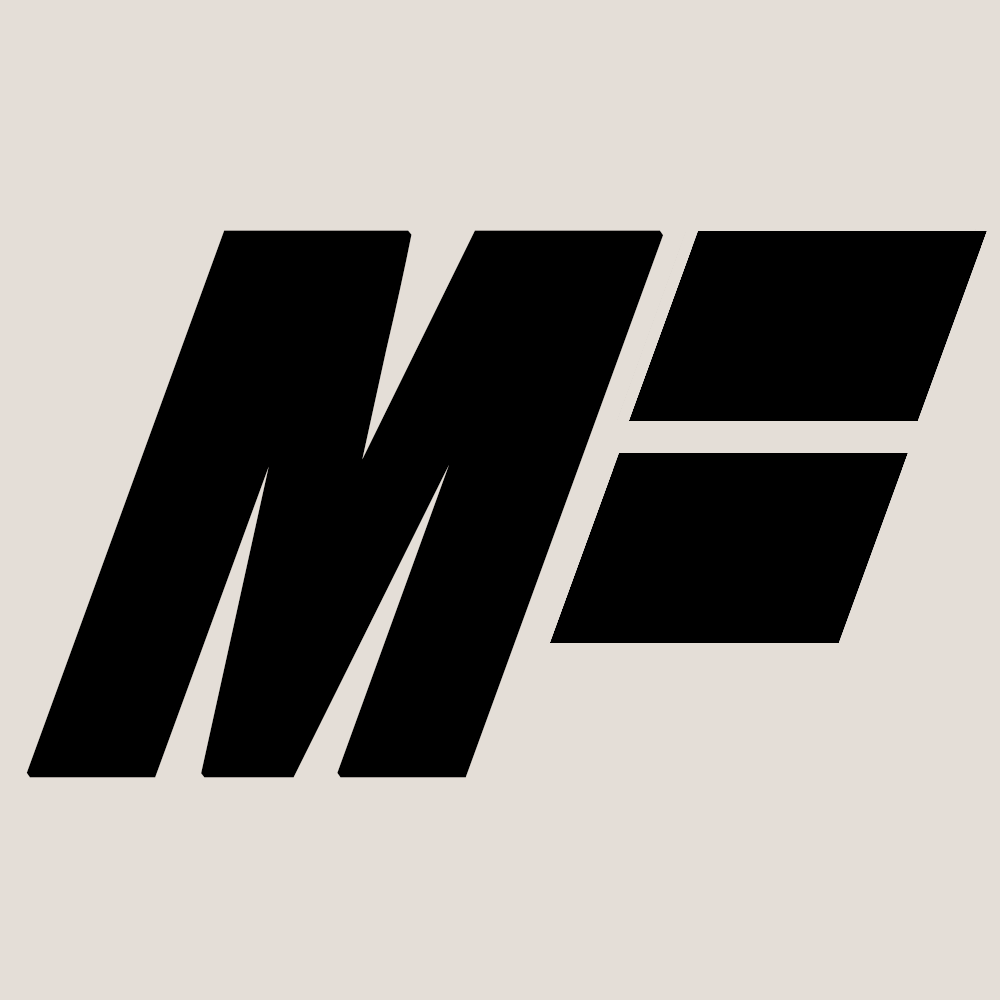
<style>
.page{position:relative;width:1000px;height:1000px;background:#e4ded7}
.page>*{position:absolute;margin:0}
.t1{font:727px "Impact";color:#000000;font-weight:bold;scale:0.94 1}
</style>
<div class="page">
<p class="t1" style="left:26px;top:230px;width:638px;height:548px">M</p>
</div>
